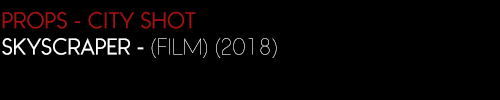
<style>
.page{position:relative;width:500px;height:100px;background:#000000}
.page>*{position:absolute;margin:0}
.t1{font:21.8px "WatchwordRegularDemo";color:#9f1313}
.t2{font:21.8px "WatchwordRegularDemo";color:#ffffff}
.t3{font:21.8px "WatchwordThinDemo";color:#ffffff}
</style>
<div class="page">
<p class="t1" style="left:2px;top:11px;width:275px;height:47px">PROPS - CITY SHOT<br><span class="t2">SKYSCRAPER - </span><span class="t3">(FILM) (2018)</span></p>
</div>
